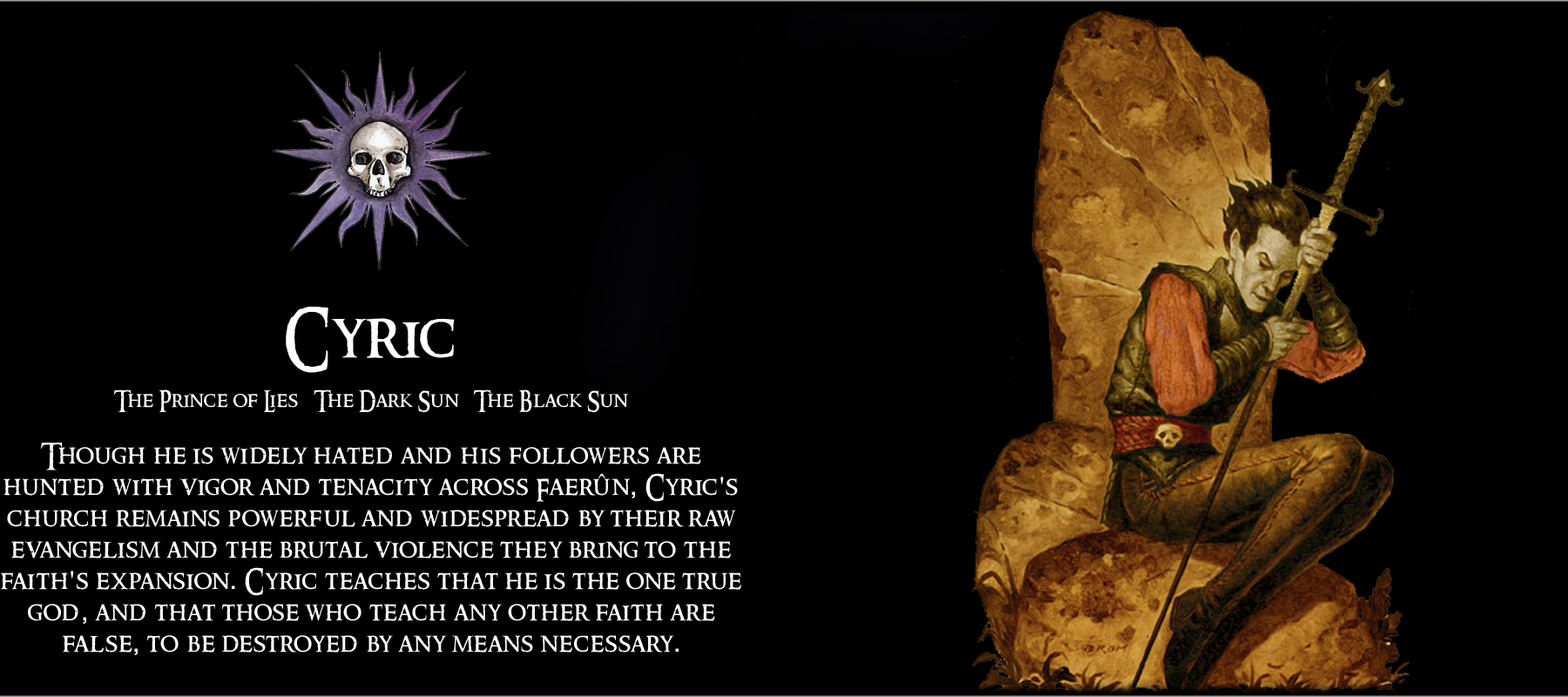
<style>
.page{position:relative;width:1568px;height:697px;background:#000000}
.page>*{position:absolute;margin:0}
.t1{font:26.1px "RingbearerMedium";letter-spacing:0.025em;color:#ffffff}
.t2{font:62.7px "RingbearerMedium";letter-spacing:0.025em;color:#ffffff}
.t3{font:20.9px "RingbearerMedium";letter-spacing:0.025em;color:#ffffff}
.t4{font:26.1px "Rockwell";letter-spacing:0.025em;color:#ffffff}
</style>
<div class="page">
<p class="t1" style="left:1px;top:307px;width:740px;height:348px;text-align:center"><span class="t2">Cyric<br></span><span class="t3"><br>The Prince of Lies   The Dark Sun   The Black Sun<br><br></span>Though he is widely hated and his followers are hunted with vigor and tenacity across Faerûn<span class="t4">,</span> Cyric<span class="t4">'</span>s church remains powerful and widespread by their raw evangelism and the brutal violence they bring to the faith<span class="t4">'</span>s expansion<span class="t4">.</span> Cyric teaches that he is the one true god<span class="t4">,</span> and that those who teach any other faith are false<span class="t4">,</span> to be destroyed by any means necessary<span class="t4">.</span></p>
</div>
